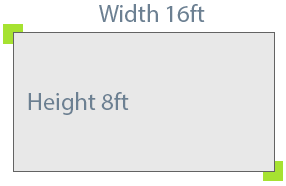
<style>
.page{position:relative;width:286px;height:186px;background:#e8e8e8}
.page>*{position:absolute;margin:0}
.t1{font:24.4px "MyriadPro-Regular";color:#6c8092}
</style>
<div class="page">
<p class="t1" style="left:99px;top:4px;width:106px;height:18px">Width 16ft</p>
<p class="t1" style="left:28px;top:92px;width:101px;height:23px">Height 8ft</p>
</div>
